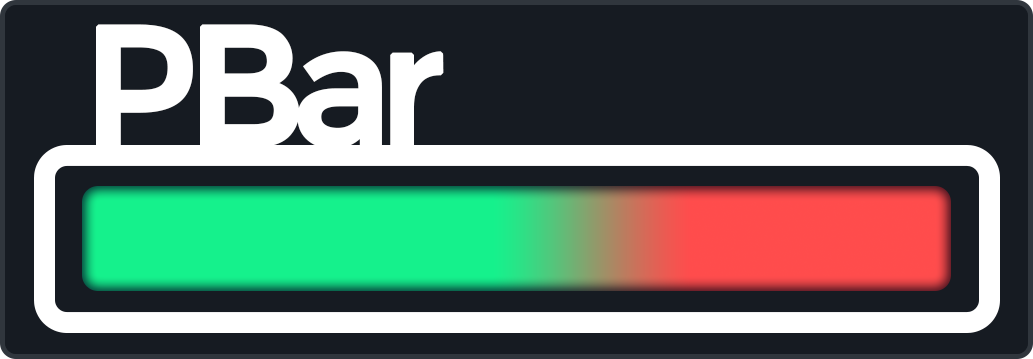
<style>
.page{position:relative;width:1033px;height:359px;background:#161b22}
.page>*{position:absolute;margin:0}
.t1{font:169.1px "Montserrat-Regular";letter-spacing:-0.1em;color:#ffffff;font-weight:bold}
</style>
<div class="page">
<p class="t1" style="left:96px;top:24px;width:348px;height:125px">PBar</p>
</div>
